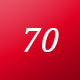
<style>
.page{position:relative;width:80px;height:80px}
.page>*{position:absolute;margin:0}
.t1{font:36px "Cambria-Italic";color:#ffffff}
</style>
<div class="page">
<p class="t1" style="left:24px;top:28px;width:35px;height:24px">70</p>
</div>
